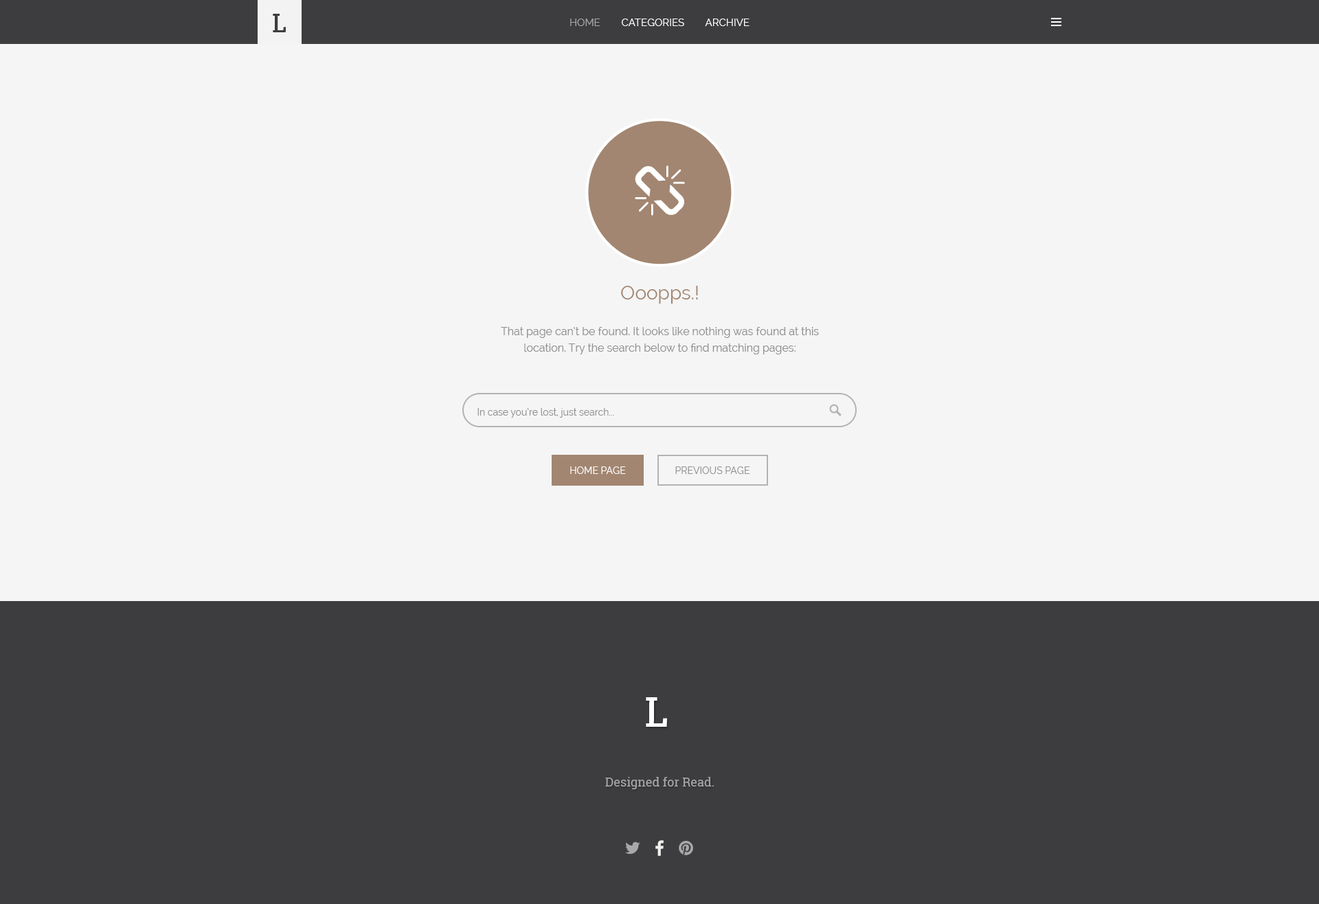
<style>
.page{position:relative;width:1319px;height:904px;background:#f5f5f5}
.page>*{position:absolute;margin:0}
.t1{font:10.3px "Raleway";color:#ffffff}
.t2{font:10.3px "Raleway";color:#a8a8a8}
.t3{font:11px/16.5px "Raleway";color:#909091}
.t4{font:12.4px/19.9px "Raleway";color:#787878}
.t5{font:19.2px/19.9px "Raleway";color:#a28671}
.t6{font:11px/35.7px "Raleway";color:#909091}
.t7{font:9.6px "Raleway";color:#909091}
.t8{font:9.6px "Raleway";color:#ffffff;text-transform:uppercase}
.t9{font:9.6px "Raleway";color:#909091;text-transform:uppercase}
.t10{font:42.6px "CaeciliaLTStd-Bold";color:#ffffff;text-transform:uppercase}
.t11{font:12.4px "RobotoSlab-Regular";color:#a8a8a8}
</style>
<div class="page">
<p class="t1" style="left:570px;top:19px;width:179px;height:7px"><span class="t2">HOME</span>        CATEGORIES        ARCHIVE</p>
<p class="t3" style="left:501px;top:286px;width:318px;height:68px;text-align:center"><span class="t4"><br></span><span class="t5">Ooopps.!<br></span><span class="t6">That page can’t be found. </span>It looks like nothing was found at this location. Try the search below to find matching pages:</p>
<p class="t7" style="left:477px;top:408px;width:137px;height:10px">In case you’re lost, just search...</p>
<p class="t8" style="left:570px;top:466px;width:56px;height:8px">HOME PAGE</p>
<p class="t9" style="left:675px;top:466px;width:75px;height:8px">PREVIOUS PAGE</p>
<p class="t10" style="left:646px;top:697px;width:21px;height:30px">l</p>
<p class="t11" style="left:605px;top:777px;width:109px;height:12px">Designed for Read.</p>
</div>
